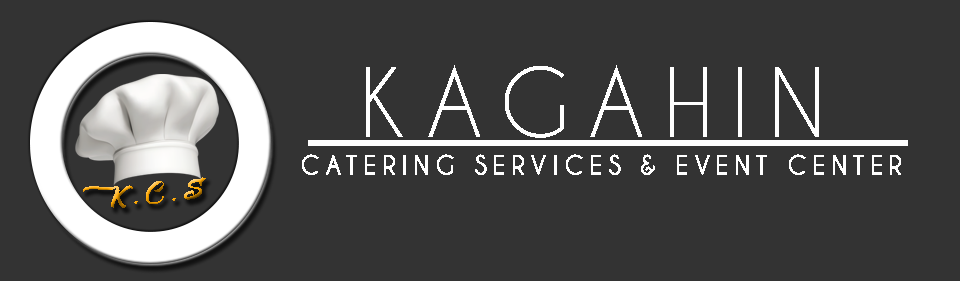
<style>
.page{position:relative;width:960px;height:281px;background:#333333}
.page>*{position:absolute;margin:0}
.t1{font:90px "CaviarDreams";letter-spacing:0.2em;color:#ffffff}
.t2{font:26.4px "CaviarDreams-Bold";letter-spacing:0.2em;color:#ffffff;scale:0.95 1}
.t3{font:42.6px "Albondigas";letter-spacing:0.2em}
</style>
<div class="page">
<p class="t1" style="left:366px;top:65px;width:453px;height:73px">KAGAHIN</p>
<p class="t2" style="left:302px;top:154px;width:599px;height:21px">CATERING SERVICES &amp; EVENT CENTER</p>
<p class="t3" style="left:83px;top:177px;width:123px;height:31px;rotate:-4deg">K.C.S</p>
</div>
